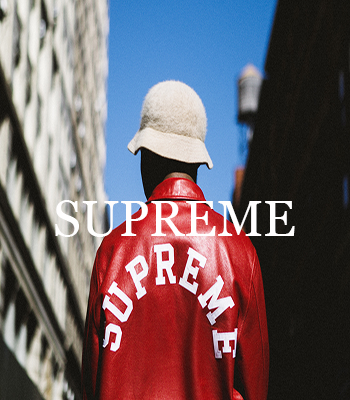
<style>
.page{position:relative;width:350px;height:400px}
.page>*{position:absolute;margin:0}
.t1{font:50px "Georgia";color:#fffefe}
</style>
<div class="page">
<p class="t1" style="left:55px;top:200px;width:240px;height:37px">SUPREME</p>
</div>
